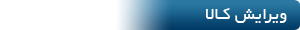
<style>
.page{position:relative;width:300px;height:30px;background:#ffffff}
.page>*{position:absolute;margin:0}
.t1{font:18.3px "BYekan";color:#ffffff}
</style>
<div class="page">
<p class="t1" style="left:206px;top:8px;width:81px;height:15px">ویرایش کـالا</p>
</div>
